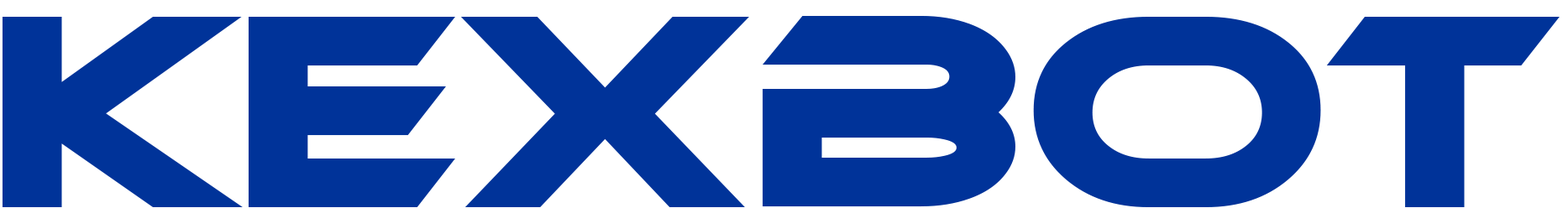
<style>
.page{position:relative;width:1568px;height:208px;background:#003399}
.page>*{position:absolute;margin:0}
.t1{font:263.7px "Ethnocentric";color:#003399}
</style>
<div class="page">
<p class="t1" style="left:3px;top:16px;width:1557px;height:191px">KEXBOT</p>
</div>
